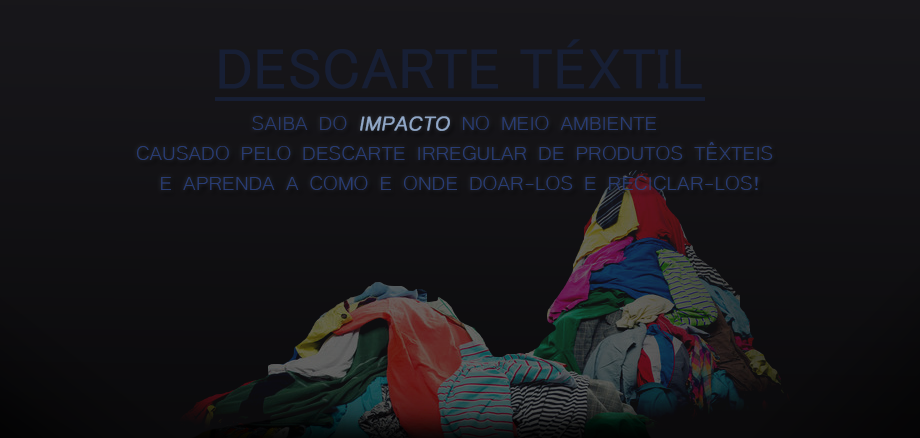
<style>
.page{position:relative;width:920px;height:438px}
.page>*{position:absolute;margin:0}
.t1{font:58.3px "MS-UIGothic";color:#171f35}
.t2{font:25px "Microsoft-Yi-Baiti";color:#293d75}
.t3{font:25px "Microsoft-Yi-Baiti";color:#283b70}
.t4{font:25px "Microsoft-Yi-Baiti";color:#91a8c8;font-weight:bold;font-style:italic}
</style>
<div class="page">
<p class="t1" style="left:219px;top:39px;width:483px;height:50px">DESCARTE TÉXTIL</p>
<p class="t2" style="left:137px;top:116px;width:636px;height:74px;text-align:center"><span class="t3">SAIBA DO </span><span class="t4">IMPACTO </span>NO MEIO AMBIENTE <br>CAUSADO PELO DESCARTE IRREGULAR DE PRODUTOS TÊXTEIS <br>E APRENDA A COMO E ONDE DOAR-LOS E RECICLAR-LOS!</p>
</div>
